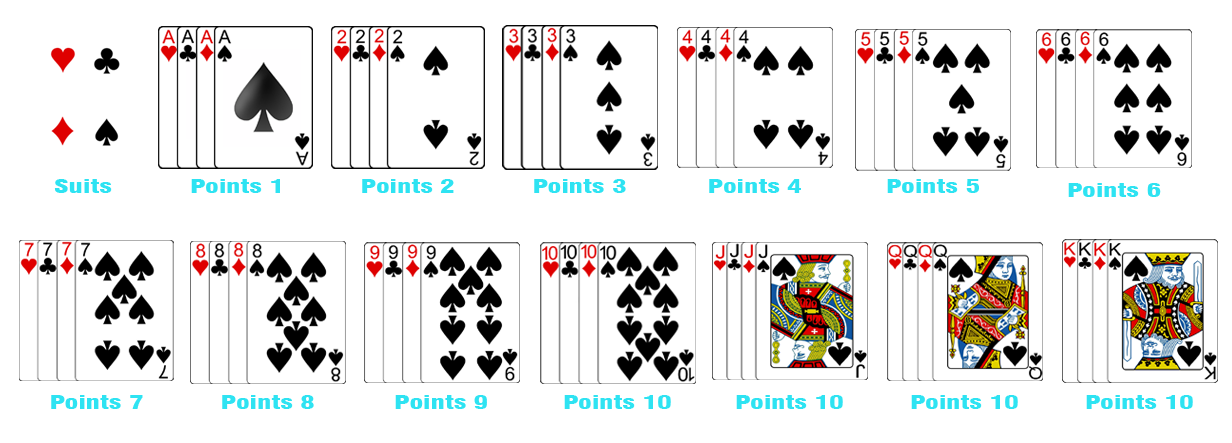
<style>
.page{position:relative;width:1232px;height:443px;background:#ffffff}
.page>*{position:absolute;margin:0}
.t1{font:18.8px "Swiss721BT-BlackCondensed";color:#2ee3f2;scale:1.48 1}
</style>
<div class="page">
<p class="t1" style="left:54px;top:179px;width:58px;height:14px">Suits</p>
<p class="t1" style="left:191px;top:179px;width:89px;height:14px">Points 1</p>
<p class="t1" style="left:362px;top:179px;width:92px;height:14px">Points 2</p>
<p class="t1" style="left:534px;top:179px;width:92px;height:14px">Points 3</p>
<p class="t1" style="left:709px;top:179px;width:92px;height:14px">Points 4</p>
<p class="t1" style="left:887px;top:179px;width:92px;height:14px">Points 5</p>
<p class="t1" style="left:1068px;top:183px;width:93px;height:14px">Points 6</p>
<p class="t1" style="left:51px;top:395px;width:92px;height:14px">Points 7</p>
<p class="t1" style="left:222px;top:395px;width:92px;height:14px">Points 8</p>
<p class="t1" style="left:395px;top:395px;width:92px;height:14px">Points 9</p>
<p class="t1" style="left:564px;top:395px;width:107px;height:14px">Points 10</p>
<p class="t1" style="left:736px;top:395px;width:107px;height:14px">Points 10</p>
<p class="t1" style="left:911px;top:395px;width:107px;height:14px">Points 10</p>
<p class="t1" style="left:1086px;top:395px;width:107px;height:14px">Points 10</p>
</div>
